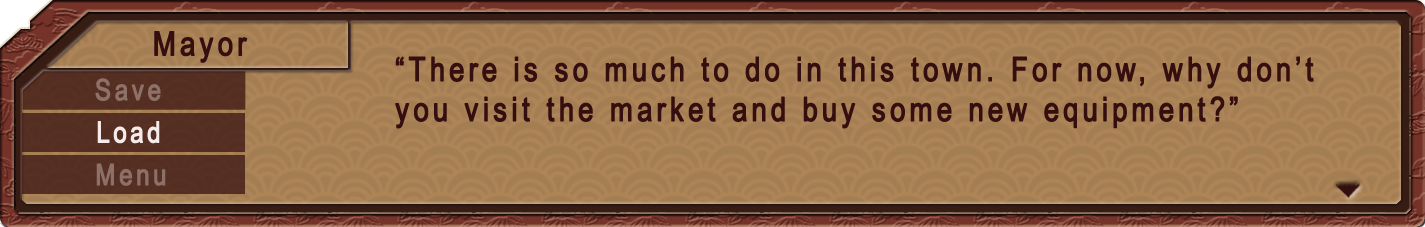
<style>
.page{position:relative;width:1425px;height:227px}
.page>*{position:absolute;margin:0}
.t1{font:33.3px "ArialNarrow";letter-spacing:0.1em;color:#350f0f;font-weight:bold}
.t2{font:29.2px "ArialNarrow";letter-spacing:0.1em;color:#8d7068;font-weight:bold}
.t3{font:29.2px "ArialNarrow";letter-spacing:0.1em;color:#f5ebeb;font-weight:bold}
</style>
<div class="page">
<p class="t1" style="left:154px;top:31px;width:94px;height:32px">Mayor</p>
<p class="t1" style="left:395px;top:56px;width:919px;height:73px">“There is so much to do in this town. For now, why don’t you visit the market and buy some new equipment?”</p>
<p class="t2" style="left:95px;top:78px;width:66px;height:23px">Save</p>
<p class="t3" style="left:97px;top:121px;width:63px;height:23px">Load</p>
<p class="t2" style="left:96px;top:163px;width:70px;height:23px">Menu</p>
</div>
